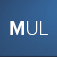
<style>
.page{position:relative;width:57px;height:57px}
.page>*{position:absolute;margin:0}
.t1{font:19.7px "ProximaNovaT-Thin";color:#ffffff}
.t2{font:19.7px "ProximaNova-Semibold";color:#ffffff}
</style>
<div class="page">
<p class="t1" style="left:10px;top:21px;width:38px;height:14px"><span class="t2">M</span>UL</p>
</div>
